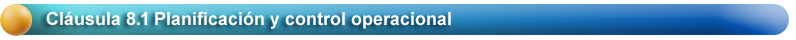
<style>
.page{position:relative;width:796px;height:40px}
.page>*{position:absolute;margin:0}
.t1{font:18px "Arial-BoldMT";color:#fefefb}
</style>
<div class="page">
<p class="t1" style="left:46px;top:11px;width:405px;height:18px">Cláusula 8.1 Planificación y control operacional</p>
</div>
